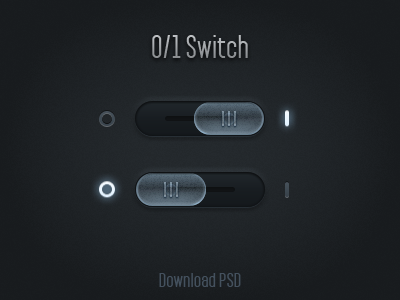
<style>
.page{position:relative;width:400px;height:300px}
.page>*{position:absolute;margin:0}
.t1{font:28px "PaktBold";color:#aaaeb2}
.t2{font:18px "PaktBold";color:#44515e}
</style>
<div class="page">
<p class="t1" style="left:152px;top:35px;width:96px;height:23px">0/1 Switch</p>
<p class="t2" style="left:159px;top:273px;width:82px;height:14px">Download PSD</p>
</div>
